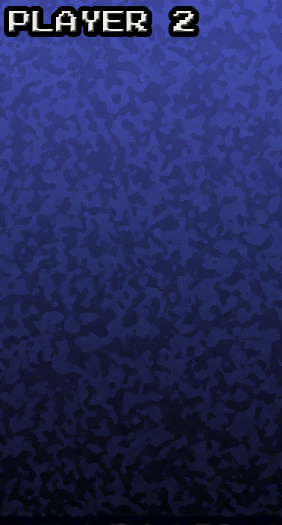
<style>
.page{position:relative;width:282px;height:525px}
.page>*{position:absolute;margin:0}
.t1{font:24px "ArcadeNormal"}
</style>
<div class="page">
<p class="t1" style="left:9px;top:11px;width:186px;height:21px">Player 2</p>
</div>
